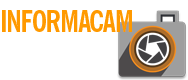
<style>
.page{position:relative;width:188px;height:80px;background:#ffffff}
.page>*{position:absolute;margin:0}
.t1{font:30px "NewsGothicBT-BoldCondensed";letter-spacing:-0.04em;color:#ff9900}
</style>
<div class="page">
<p class="t1" style="left:2px;top:10px;width:130px;height:22px">INFORMACAM</p>
</div>
